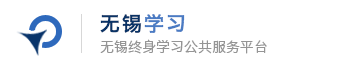
<style>
.page{position:relative;width:340px;height:70px;background:#ffffff}
.page>*{position:absolute;margin:0}
.t1{font:20px "HiraginoSansGB-W6";letter-spacing:0.1em;color:#093366}
.t2{font:20px "HiraginoSansGB-W6";letter-spacing:0.1em;color:#4a7bc3}
.t3{font:14px "HiraginoSansGB-W3";color:#959595}
</style>
<div class="page">
<p class="t1" style="left:100px;top:14px;width:85px;height:19px">无锡<span class="t2">学习</span></p>
<p class="t3" style="left:100px;top:39px;width:167px;height:15px">无锡终身学习公共服务平台</p>
</div>
